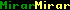
<style>
.page{position:relative;width:70px;height:10px;background:#000000}
.page>*{position:absolute;margin:0}
.t1{font:13.2px "Onesize";color:#009900;scale:0.91 1}
.t2{font:13.2px "Onesize";color:#ffff66;scale:0.91 1}
</style>
<div class="page">
<p class="t1" style="left:0px;top:1px;width:35px;height:8px">Mirar</p>
<p class="t2" style="left:35px;top:1px;width:35px;height:8px">Mirar</p>
</div>
